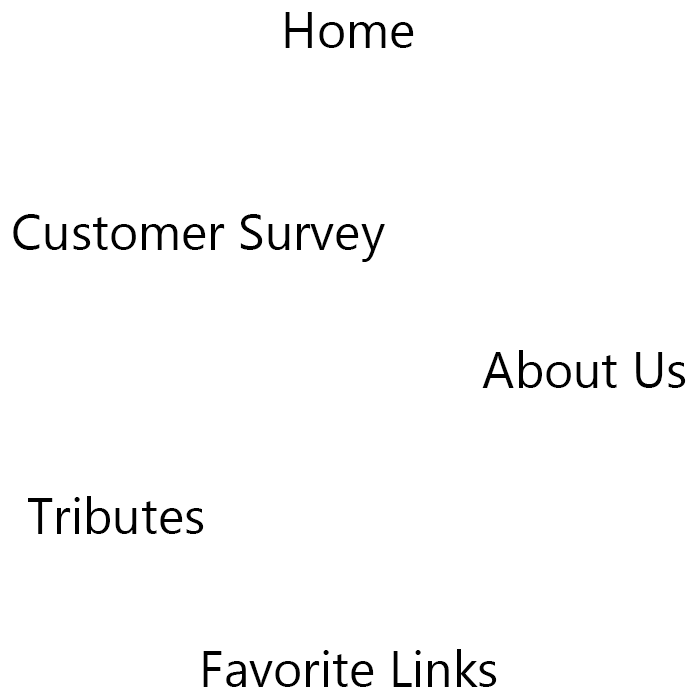
<style>
.page{position:relative;width:700px;height:700px;background:#ffffff}
.page>*{position:absolute;margin:0}
.t1{font:50px "Gadugi";color:#000000}
</style>
<div class="page">
<p class="t1" style="left:285px;top:12px;width:129px;height:36px">Home</p>
<p class="t1" style="left:13px;top:214px;width:372px;height:48px">Customer Survey</p>
<p class="t1" style="left:482px;top:350px;width:204px;height:38px">About Us</p>
<p class="t1" style="left:28px;top:496px;width:176px;height:38px">Tributes</p>
<p class="t1" style="left:203px;top:649px;width:294px;height:38px">Favorite Links</p>
</div>
